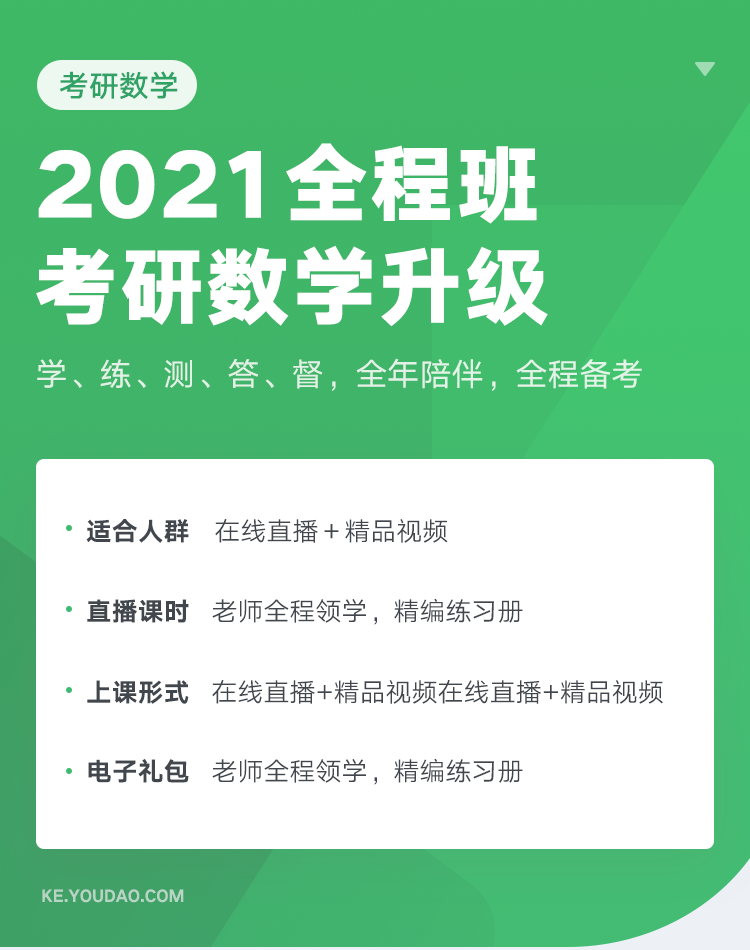
<style>
.page{position:relative;width:750px;height:950px;background:#ffffff}
.page>*{position:absolute;margin:0}
.t1{font:30px "HYQiHei-FES";color:#30a265}
.t2{font:86px/102px "HYQiHei-IEW";color:#ffffff}
.t3{font:32px "HYQiHei-EES";color:#e2f1e6}
.t4{font:26px "HYQiHei-HZW";color:#42474e}
.t5{font:26px "HYQiHei-EZS";color:#42474e}
.t6{font:16px "HYQiHeiX1-HEW";color:#b7d5c5;text-transform:uppercase}
</style>
<div class="page">
<p class="t1" style="left:59px;top:71px;width:119px;height:29px">考研数学</p>
<p class="t2" style="left:36px;top:143px;width:512px;height:184px">2021全程班<br>考研数学升级</p>
<p class="t3" style="left:37px;top:358px;width:605px;height:33px">学、练、测、答、督，全年陪伴，全程备考</p>
<p class="t4" style="left:86px;top:519px;width:103px;height:24px">适合人群</p>
<p class="t5" style="left:215px;top:519px;width:233px;height:24px">在线直播＋精品视频</p>
<p class="t4" style="left:87px;top:599px;width:102px;height:24px">直播课时</p>
<p class="t5" style="left:212px;top:598px;width:311px;height:27px">老师全程领学，精编练习册</p>
<p class="t4" style="left:87px;top:680px;width:102px;height:24px">上课形式</p>
<p class="t5" style="left:212px;top:680px;width:451px;height:24px">在线直播+精品视频在线直播+精品视频</p>
<p class="t4" style="left:88px;top:758px;width:101px;height:25px">电子礼包</p>
<p class="t5" style="left:212px;top:758px;width:311px;height:27px">老师全程领学，精编练习册</p>
<p class="t6" style="left:42px;top:889px;width:142px;height:14px">ke.youdao.com</p>
</div>
